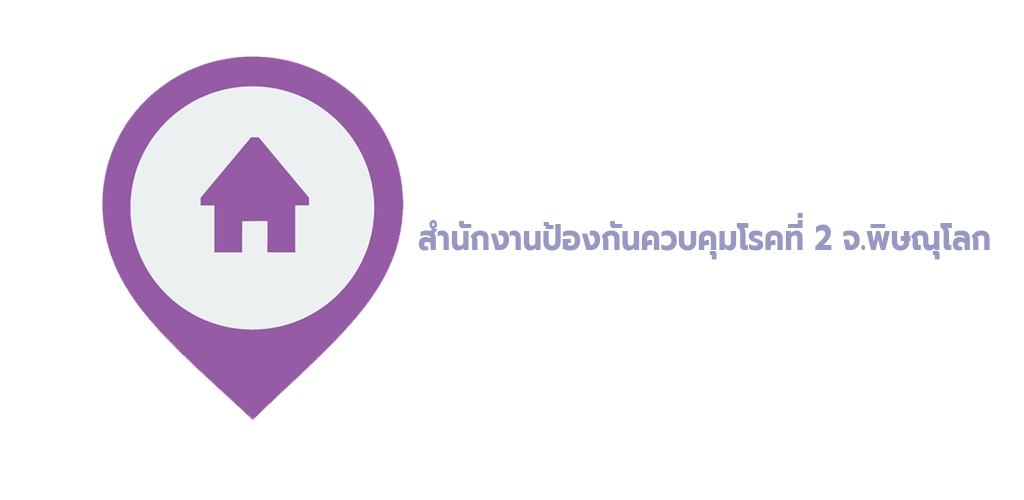
<style>
.page{position:relative;width:1024px;height:500px;background:#ffffff}
.page>*{position:absolute;margin:0}
.t1{font:36px "Prompt-Bold";color:#9899c2;scale:0.85 1}
</style>
<div class="page">
<p class="t1" style="left:418px;top:213px;width:572px;height:47px">สำนักงานป้องกันควบคุมโรคที่ 2 จ.พิษณุโลก</p>
</div>
